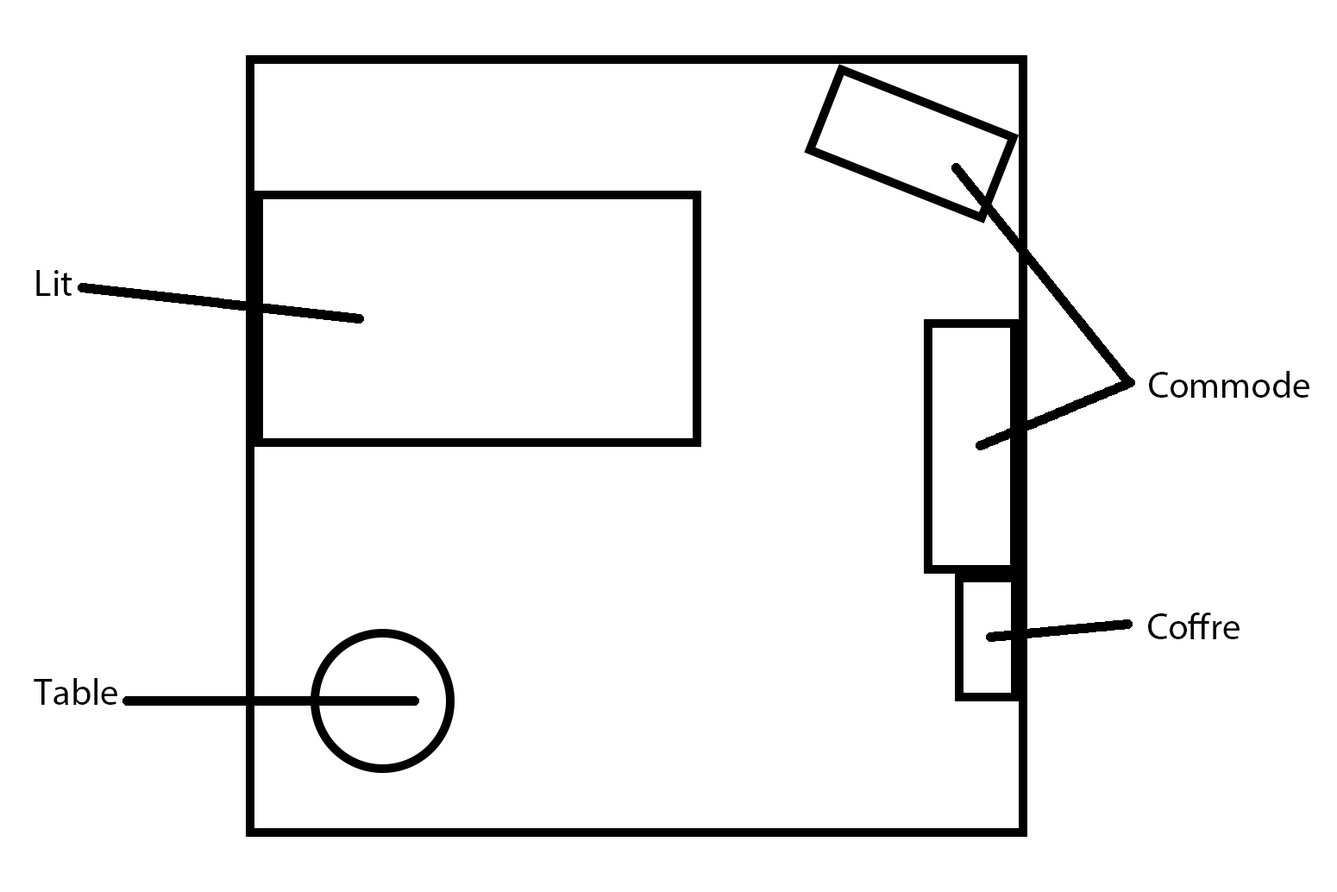
<style>
.page{position:relative;width:1337px;height:892px;background:#ffffff}
.page>*{position:absolute;margin:0}
.t1{font:37.2px "MyriadPro-Regular";color:#000000}
</style>
<div class="page">
<p class="t1" style="left:36px;top:270px;width:36px;height:26px">Lit</p>
<p class="t1" style="left:1149px;top:371px;width:160px;height:27px">Commode</p>
<p class="t1" style="left:1148px;top:612px;width:92px;height:27px">Coffre</p>
<p class="t1" style="left:34px;top:678px;width:83px;height:27px">Table</p>
</div>
